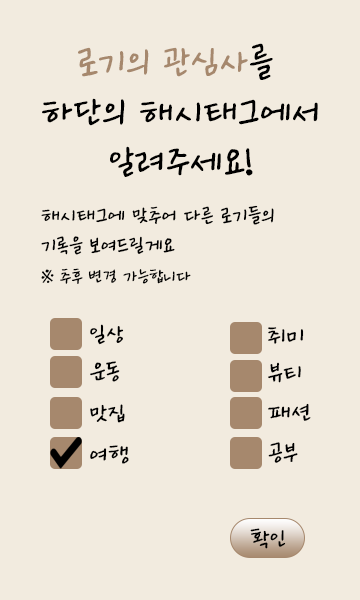
<style>
.page{position:relative;width:360px;height:600px;background:#f2ebdf}
.page>*{position:absolute;margin:0}
.t1{font:40px/50.1px "Ownglyph_Dailyokja-Rg";color:#000000}
.t2{font:40px/50.1px "Ownglyph_Dailyokja-Rg";color:#a6886d}
.t3{font:22px/29.9px "Ownglyph_Dailyokja-Rg";color:#000000}
.t4{font:19px/29.9px "Ownglyph_Dailyokja-Rg";color:#000000}
.t5{font:25px "Ownglyph_Dailyokja-Rg";color:#000000}
.t6{font:25px "Ownglyph_Dailyokja-Rg";color:#000000;scale:1.04 1}
.t7{font:25px "Ownglyph_Dailyokja-Rg";color:#000000;scale:1.03 1}
.t8{font:25px "Ownglyph_Dailyokja-Rg";color:#000000;scale:1.06 1}
.t9{font:25px "Ownglyph_Dailyokja-Rg";color:#000000;scale:1.05 1}
</style>
<div class="page">
<p class="t1" style="left:42px;top:43px;width:276px;height:134px;text-align:center"><span class="t2">로기의 관심사</span>를 <br>하단의 해시태그에서<br>알려주세요!</p>
<p class="t3" style="left:41px;top:205px;width:233px;height:79px">해시태그에 맞추어 다른 로기들의<br>기록을 보여드릴게요<br><span class="t4">※ 추후 변경 가능합니다</span></p>
<p class="t5" style="left:90px;top:324px;width:34px;height:21px">일상</p>
<p class="t6" style="left:268px;top:327px;width:36px;height:17px">취미</p>
<p class="t7" style="left:90px;top:361px;width:30px;height:21px">운동</p>
<p class="t7" style="left:268px;top:362px;width:33px;height:21px">뷰티</p>
<p class="t7" style="left:90px;top:404px;width:35px;height:19px">맛집</p>
<p class="t8" style="left:268px;top:403px;width:43px;height:18px">패션</p>
<p class="t7" style="left:90px;top:445px;width:39px;height:19px">여행</p>
<p class="t9" style="left:268px;top:442px;width:30px;height:21px">공부</p>
<p class="t5" style="left:250px;top:528px;width:36px;height:21px">확인</p>
</div>
